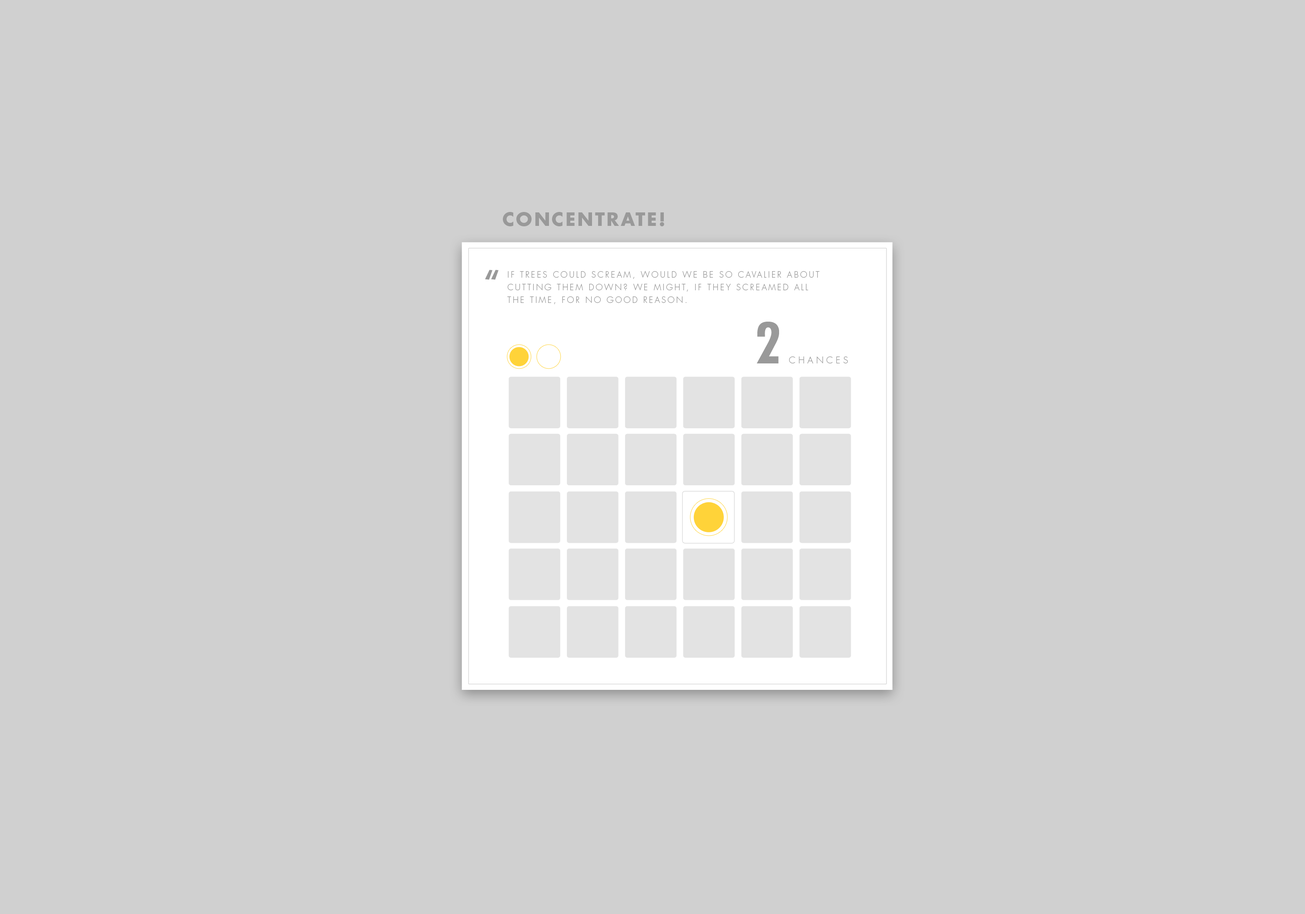
<style>
.page{position:relative;width:1305px;height:914px;background:#d0d0d0}
.page>*{position:absolute;margin:0}
.t1{font:18.1px "Futura-Bold";letter-spacing:0.1em;color:#999999}
.t2{font:31.1px "Futura-Heavy";letter-spacing:0.2em;color:#999999;text-transform:uppercase}
.t3{font:8.2px/12.7px "Futura-Light";letter-spacing:0.2em;color:#999999;text-transform:uppercase}
.t4{font:54.4px "Futura-CondensedBold";letter-spacing:0.3em;color:#999999}
.t5{font:9.1px "Futura-Light";letter-spacing:0.3em;color:#999999}
</style>
<div class="page">
<p class="t1" style="left:503px;top:212px;width:161px;height:14px">CONCENTRATE!</p>
<p class="t2" style="left:485px;top:270px;width:14px;height:10px">“</p>
<p class="t3" style="left:507px;top:271px;width:313px;height:33px">If trees could scream, would we be so cavalier about cutting them down? We might, if they screamed all the time, for no good reason.</p>
<p class="t4" style="left:757px;top:322px;width:22px;height:41px">2</p>
<p class="t5" style="left:789px;top:356px;width:59px;height:7px">CHANCES</p>
</div>
